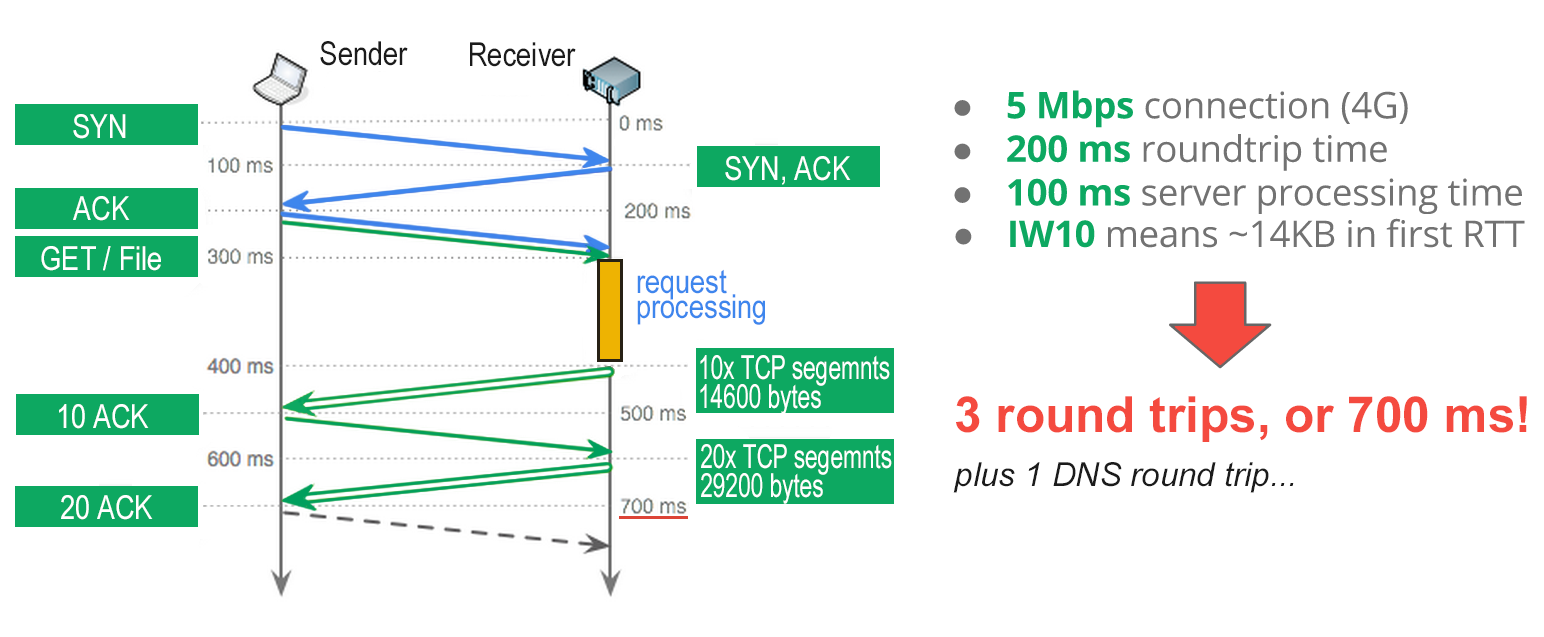
<style>
.page{position:relative;width:1544px;height:637px;background:#ffffff}
.page>*{position:absolute;margin:0}
.t1{font:33.3px "ArialNarrow";color:#1b1b1b}
.t2{font:33.3px "ArialNarrow";color:#ffffff}
.t3{font:33.3px/25px "ArialNarrow";color:#3e86ed}
.t4{font:33.3px/29.2px "ArialNarrow";color:#ffffff;scale:0.83 1}
.t5{font:50px "Arial-BoldMT";color:#f44a3f}
.t6{font:33.3px "Arial-ItalicMT";color:#1b1b1b}
</style>
<div class="page">
<p class="t1" style="left:320px;top:41px;width:88px;height:25px">Sender</p>
<p class="t1" style="left:470px;top:42px;width:106px;height:25px">Receiver</p>
<p class="t2" style="left:73px;top:114px;width:53px;height:25px">SYN</p>
<p class="t2" style="left:725px;top:156px;width:126px;height:29px">SYN, ACK</p>
<p class="t2" style="left:73px;top:196px;width:57px;height:25px">ACK</p>
<p class="t2" style="left:41px;top:246px;width:120px;height:25px">GET / File</p>
<p class="t3" style="left:637px;top:269px;width:128px;height:56px">request<br>processing</p>
<p class="t4" style="left:700px;top:355px;width:190px;height:60px">10x TCP segemnts<br>14600 bytes</p>
<p class="t5" style="left:956px;top:396px;width:571px;height:46px">3 round trips, or 700 ms!</p>
<p class="t2" style="left:59px;top:404px;width:90px;height:25px">10 ACK</p>
<p class="t4" style="left:701px;top:444px;width:191px;height:60px">20x TCP segemnts<br>29200 bytes</p>
<p class="t6" style="left:953px;top:462px;width:341px;height:31px">plus 1 DNS round trip...</p>
<p class="t2" style="left:61px;top:495px;width:92px;height:25px">20 ACK</p>
</div>
